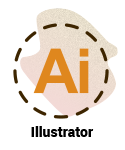
<style>
.page{position:relative;width:125px;height:150px;background:#ffffff}
.page>*{position:absolute;margin:0}
.t1{font:14px "Roboto-Black";color:#000000}
</style>
<div class="page">
<p class="t1" style="left:31px;top:126px;width:63px;height:11px">Illustrator</p>
</div>
